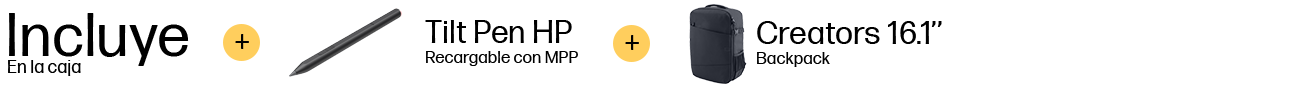
<style>
.page{position:relative;width:1312px;height:86px;background:#ffffff}
.page>*{position:absolute;margin:0}
.t1{font:60px "FormaDJRMicro-Regular";color:#000000}
.t2{font:32px "FormaDJRMicro-Regular";color:#000000}
.t3{font:30px "FormaDJRMicro-Regular";color:#000000}
.t4{font:17px "FormaDJRMicro-Regular";color:#000000}
.t5{font:18px "FormaDJRMicro-Regular";color:#000000}
</style>
<div class="page">
<p class="t1" style="left:9px;top:13px;width:180px;height:53px">Incluye</p>
<p class="t2" style="left:425px;top:20px;width:147px;height:23px">Tilt Pen HP</p>
<p class="t2" style="left:757px;top:21px;width:185px;height:23px">Creators 16.1’’</p>
<p class="t3" style="left:235px;top:34px;width:14px;height:15px">+</p>
<p class="t3" style="left:625px;top:35px;width:14px;height:15px">+</p>
<p class="t4" style="left:426px;top:51px;width:152px;height:15px">Recargable con MPP</p>
<p class="t4" style="left:757px;top:52px;width:73px;height:15px">Backpack</p>
<p class="t5" style="left:8px;top:60px;width:73px;height:16px">En la caja</p>
</div>
